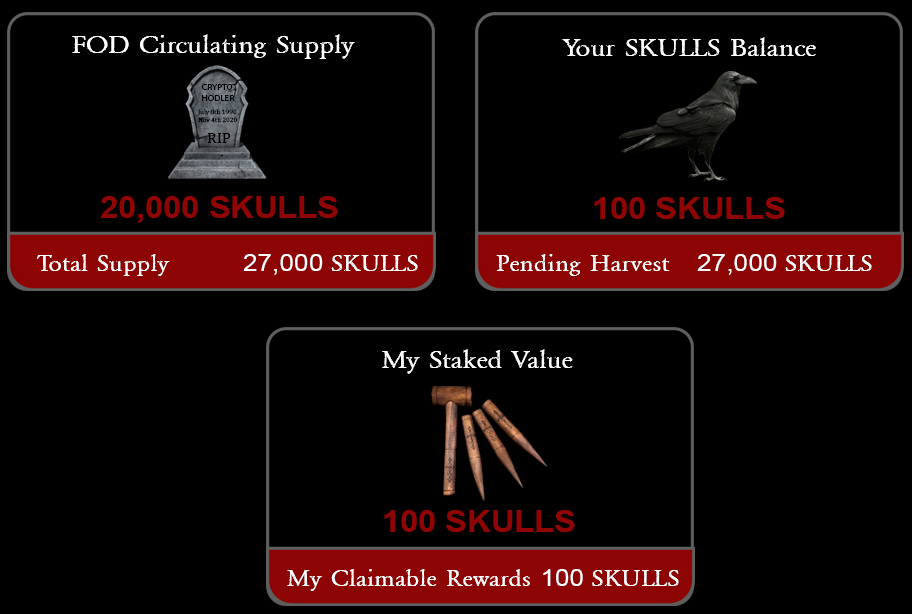
<style>
.page{position:relative;width:912px;height:614px;background:#000000}
.page>*{position:absolute;margin:0}
.t1{font:26.4px "NIGHTMAREPILLS";color:#ffffff;scale:1.09 1}
.t2{font:8.6px "MyriadPro-Regular";color:#000000;scale:1.09 1}
.t3{font:6.2px "Cambria";color:#000000;scale:1.09 1}
.t4{font:14.2px "Cambria";color:#000000;scale:1.09 1}
.t5{font:30px "Arial-BoldMT";color:#8f0404;scale:1.09 1}
.t6{font:24.3px "NIGHTMAREPILLS";color:#ffffff;scale:1.09 1}
.t7{font:24.3px "ArialMT";color:#ffffff;scale:1.09 1}
</style>
<div class="page">
<p class="t1" style="left:72px;top:34px;width:283px;height:25px">FOD Circulating Supply</p>
<p class="t1" style="left:562px;top:37px;width:254px;height:19px">Your SKULLS Balance</p>
<p class="t2" style="left:202px;top:84px;width:33px;height:17px">CRYPTO<br>HODLER</p>
<p class="t3" style="left:198px;top:109px;width:39px;height:14px">July 8th 1990<br>Nov 4th 2020</p>
<p class="t4" style="left:208px;top:133px;width:22px;height:10px">RIP</p>
<p class="t5" style="left:101px;top:196px;width:237px;height:27px">20,000 SKULLS</p>
<p class="t5" style="left:594px;top:197px;width:191px;height:22px">100 SKULLS</p>
<p class="t6" style="left:36px;top:254px;width:382px;height:22px">Total Supply        <span class="t7">27,000 </span>SKULLS</p>
<p class="t6" style="left:496px;top:254px;width:376px;height:22px">Pending Harvest   <span class="t7">27,000 </span>SKULLS</p>
<p class="t1" style="left:382px;top:349px;width:191px;height:25px">My Staked Value</p>
<p class="t5" style="left:384px;top:510px;width:191px;height:22px">100 SKULLS</p>
<p class="t6" style="left:287px;top:569px;width:392px;height:22px">My Claimable Rewards <span class="t7">100 </span>SKULLS</p>
</div>
